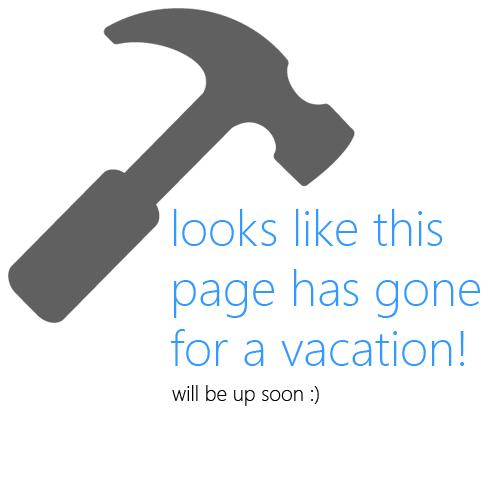
<style>
.page{position:relative;width:500px;height:500px;background:#ffffff}
.page>*{position:absolute;margin:0}
.t1{font:50px "SegoeUI-Light";color:#3399ff}
.t2{font:20.9px "SegoeUI-Light";color:#000000}
</style>
<div class="page">
<p class="t1" style="left:170px;top:209px;width:310px;height:157px">looks like this <br>page has gone <br>for a vacation!</p>
<p class="t2" style="left:172px;top:385px;width:147px;height:21px">will be up soon :)</p>
</div>
